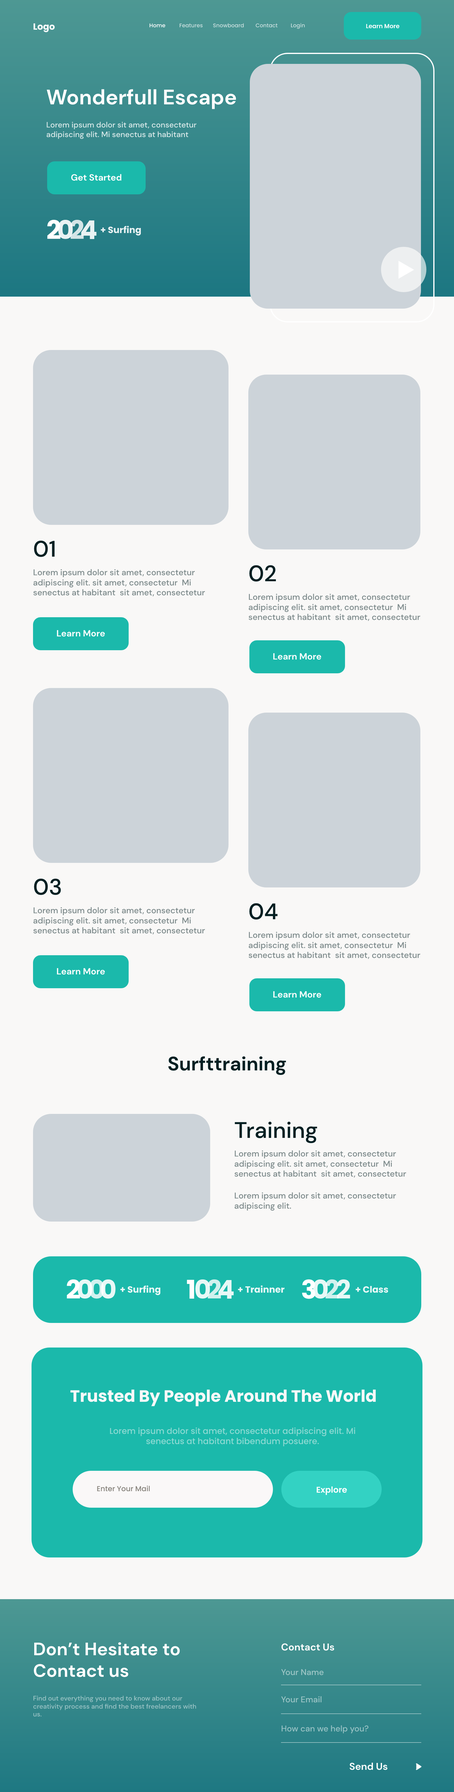
<style>
.page{position:relative;width:454px;height:1792px;background:#f9f8f7}
.page>*{position:absolute;margin:0}
.t1{font:5.4px "Poppins-Medium";color:#ffffff}
.t2{font:5.4px "Poppins-Medium";color:#c8dfde}
.t3{font:6px "Poppins-SemiBold";color:#ffffff}
.t4{font:21px "DMSans-Bold";color:#ffffff}
.t5{font:7.8px "DMSans-Medium";color:#d7e7e8}
.t6{font:9px "DMSans-Bold";color:#ffffff}
.t7{font:25.8px "Poppins-Bold";color:#ffffff}
.t8{font:25.8px "Poppins-Bold";color:#d4e5e7}
.t9{font:9px "Poppins-Bold";color:#ffffff}
.t10{font:22.5px "DMSans-Medium";color:#031f22}
.t11{font:8.4px "DMSans-Medium";color:#7e8b8c}
.t12{font:19.5px "DMSans-Bold";color:#031f22}
.t13{font:25.8px "Poppins-Bold"}
.t14{font:25.8px "Poppins-Bold";color:#d1f1ee}
.t15{font:16.5px "Poppins-Bold";color:#faf8f8}
.t16{font:8.4px "Poppins-Medium";color:#8bd9d2}
.t17{font:7.2px "Poppins-Medium";color:#87837c}
.t18{font:8.4px "Poppins-SemiBold";color:#ffffff}
.t19{font:18px "DMSans-Bold";color:#ffffff}
.t20{font:9.9px "DMSans-Bold";color:#ffffff}
.t21{font:8.4px "DMSans-Medium";color:#9dc6c6}
.t22{font:6.6px "DMSans-Medium";color:#99c3c5}
.t23{font:8.4px "DMSans-Medium";color:#9ac3c5}
.t24{font:8.4px "DMSans-Medium";color:#96c1c4}
</style>
<div class="page">
<p class="t1" style="left:149px;top:23px;width:16px;height:5px">Home</p>
<p class="t2" style="left:179px;top:23px;width:23px;height:5px">Features</p>
<p class="t2" style="left:213px;top:23px;width:31px;height:5px">Snowboard</p>
<p class="t2" style="left:255px;top:23px;width:22px;height:5px">Contact</p>
<p class="t2" style="left:291px;top:23px;width:13px;height:6px">Login</p>
<p class="t3" style="left:366px;top:24px;width:33px;height:4px">Learn More</p>
<p class="t4" style="left:46px;top:89px;width:190px;height:20px">Wonderfull Escape</p>
<p class="t5" style="left:46px;top:122px;width:150px;height:17px">Lorem ipsum dolor sit amet, consectetur adipiscing elit. Mi senectus at habitant</p>
<p class="t6" style="left:71px;top:174px;width:51px;height:7px">Get Started</p>
<p class="t7" style="left:47px;top:220px;width:13px;height:19px">2</p>
<p class="t7" style="left:58px;top:220px;width:15px;height:19px;opacity:0.9">0</p>
<p class="t8" style="left:70px;top:220px;width:14px;height:19px">2</p>
<p class="t7" style="left:81px;top:220px;width:16px;height:19px;opacity:0.9">4</p>
<p class="t9" style="left:100px;top:226px;width:41px;height:10px;opacity:0.9">+ Surfing</p>
<p class="t10" style="left:34px;top:541px;width:21px;height:16px">01</p>
<p class="t11" style="left:33px;top:569px;width:172px;height:28px">Lorem ipsum dolor sit amet, consectetur adipiscing elit. sit amet, consectetur  Mi senectus at habitant  sit amet, consectetur</p>
<p class="t10" style="left:249px;top:565px;width:27px;height:17px">02</p>
<p class="t11" style="left:248px;top:594px;width:172px;height:27px">Lorem ipsum dolor sit amet, consectetur adipiscing elit. sit amet, consectetur  Mi senectus at habitant  sit amet, consectetur</p>
<p class="t6" style="left:57px;top:630px;width:48px;height:7px">Learn More</p>
<p class="t6" style="left:273px;top:653px;width:48px;height:7px">Learn More</p>
<p class="t10" style="left:34px;top:879px;width:27px;height:16px">03</p>
<p class="t10" style="left:249px;top:903px;width:29px;height:17px">04</p>
<p class="t11" style="left:33px;top:907px;width:172px;height:28px">Lorem ipsum dolor sit amet, consectetur adipiscing elit. sit amet, consectetur  Mi senectus at habitant  sit amet, consectetur</p>
<p class="t11" style="left:248px;top:932px;width:172px;height:27px">Lorem ipsum dolor sit amet, consectetur adipiscing elit. sit amet, consectetur  Mi senectus at habitant  sit amet, consectetur</p>
<p class="t6" style="left:57px;top:968px;width:48px;height:7px">Learn More</p>
<p class="t6" style="left:273px;top:992px;width:48px;height:6px">Learn More</p>
<p class="t12" style="left:168px;top:1057px;width:118px;height:19px">Surfttraining</p>
<p class="t10" style="left:235px;top:1122px;width:82px;height:22px">Training</p>
<p class="t11" style="left:234px;top:1150px;width:172px;height:28px">Lorem ipsum dolor sit amet, consectetur adipiscing elit. sit amet, consectetur  Mi senectus at habitant  sit amet, consectetur</p>
<p class="t11" style="left:234px;top:1192px;width:162px;height:19px">Lorem ipsum dolor sit amet, consectetur adipiscing elit.</p>
<p class="t7" style="left:67px;top:1280px;width:13px;height:19px">2</p>
<p class="t7" style="left:77px;top:1280px;width:15px;height:19px;opacity:0.9">0</p>
<p class="t13" style="left:89px;top:1280px;width:15px;height:19px">0</p>
<p class="t7" style="left:101px;top:1280px;width:15px;height:19px;opacity:0.9">0</p>
<p class="t9" style="left:120px;top:1286px;width:40px;height:10px;opacity:0.9">+ Surfing</p>
<p class="t7" style="left:187px;top:1280px;width:7px;height:19px">1</p>
<p class="t7" style="left:195px;top:1280px;width:15px;height:19px;opacity:0.9">0</p>
<p class="t14" style="left:208px;top:1280px;width:13px;height:19px">2</p>
<p class="t7" style="left:218px;top:1280px;width:16px;height:19px;opacity:0.9">4</p>
<p class="t9" style="left:238px;top:1286px;width:46px;height:7px;opacity:0.9">+ Trainner</p>
<p class="t7" style="left:302px;top:1280px;width:13px;height:19px">3</p>
<p class="t7" style="left:313px;top:1280px;width:15px;height:19px;opacity:0.9">0</p>
<p class="t14" style="left:325px;top:1280px;width:13px;height:19px">2</p>
<p class="t7" style="left:337px;top:1280px;width:13px;height:19px;opacity:0.9">2</p>
<p class="t9" style="left:355px;top:1286px;width:33px;height:7px;opacity:0.9">+ Class</p>
<p class="t15" style="left:70px;top:1390px;width:306px;height:17px">Trusted By People Around The World</p>
<p class="t16" style="left:110px;top:1428px;width:245px;height:19px;text-align:center">Lorem ipsum dolor sit amet, consectetur adipiscing elit. Mi senectus at habitant bibendum posuere.</p>
<p class="t17" style="left:97px;top:1486px;width:53px;height:6px">Enter Your Mail</p>
<p class="t18" style="left:316px;top:1487px;width:31px;height:9px">Explore</p>
<p class="t19" style="left:34px;top:1642px;width:146px;height:36px">Don’t Hesitate to<br>Contact us</p>
<p class="t20" style="left:281px;top:1644px;width:53px;height:7px">Contact Us</p>
<p class="t21" style="left:281px;top:1670px;width:42px;height:6px">Your Name</p>
<p class="t22" style="left:33px;top:1696px;width:163px;height:21px">Find out everything you need to know about our creativity process and find the best freelancers with us.</p>
<p class="t23" style="left:281px;top:1696px;width:40px;height:7px">Your Email</p>
<p class="t24" style="left:281px;top:1726px;width:87px;height:8px">How can we help you?</p>
<p class="t20" style="left:349px;top:1763px;width:38px;height:8px">Send Us</p>
</div>
